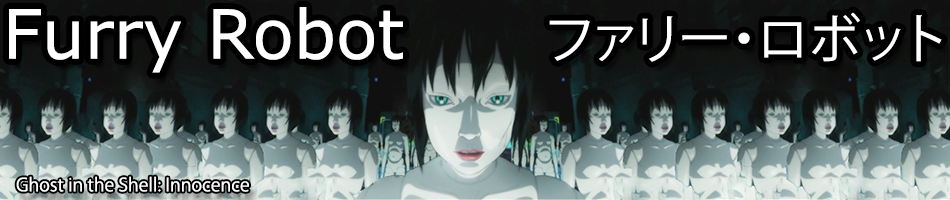
<style>
.page{position:relative;width:950px;height:200px}
.page>*{position:absolute;margin:0}
.t1{font:68px "Verdana";color:#ffffff}
.t2{font:53px "KozGoPr6N-Regular";color:#ffffff}
.t3{font:18px "KozGoPr6N-Regular";color:#ffffff}
</style>
<div class="page">
<p class="t1" style="left:9px;top:7px;width:394px;height:66px">Furry Robot</p>
<p class="t2" style="left:549px;top:12px;width:393px;height:50px">ファリー・ロボット</p>
<p class="t3" style="left:16px;top:176px;width:233px;height:16px">Ghost in the Shell: Innocence</p>
</div>
